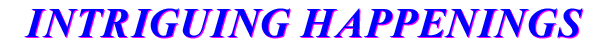
<style>
.page{position:relative;width:612px;height:44px;background:#ffffff}
.page>*{position:absolute;margin:0}
.t1{font:42px "TimesNewRomanPS-BoldItalicMT";color:#0000ff;text-transform:uppercase}
</style>
<div class="page">
<p class="t1" style="left:24px;top:8px;width:559px;height:30px">INTRIGUING HAPPENINGS</p>
</div>
